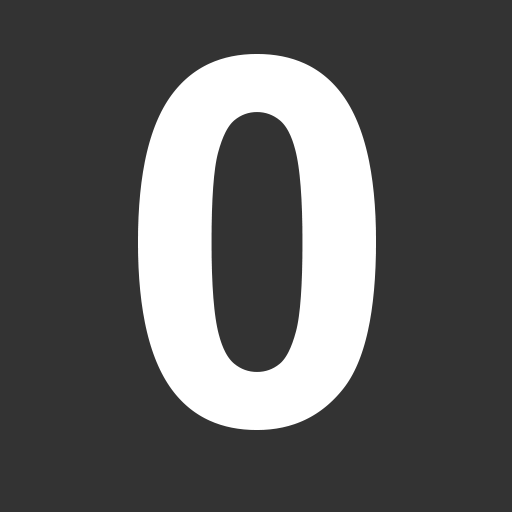
<style>
.page{position:relative;width:512px;height:512px;background:#333333}
.page>*{position:absolute;margin:0}
.t1{font:512px "Arial-BoldMT";color:#ffffff}
</style>
<div class="page">
<p class="t1" style="left:138px;top:54px;width:238px;height:376px;rotate:180deg">0</p>
</div>
